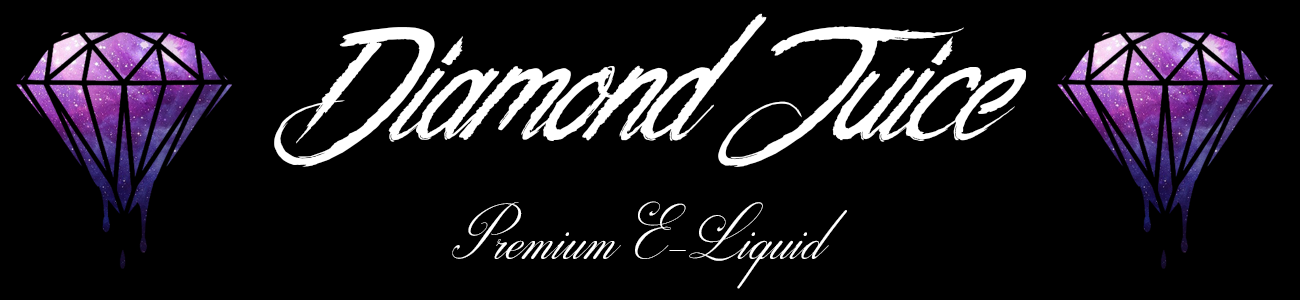
<style>
.page{position:relative;width:1300px;height:300px;background:#000000}
.page>*{position:absolute;margin:0}
.t1{font:138.8px "The-Night-Creatures";color:#ffffff;font-style:italic}
.t2{font:74.1px "Darleston";color:#ffffff;font-style:italic}
</style>
<div class="page">
<p class="t1" style="left:274px;top:13px;width:752px;height:154px">Diamond Juice</p>
<p class="t2" style="left:452px;top:201px;width:395px;height:88px">Premium E-Liquid</p>
</div>
